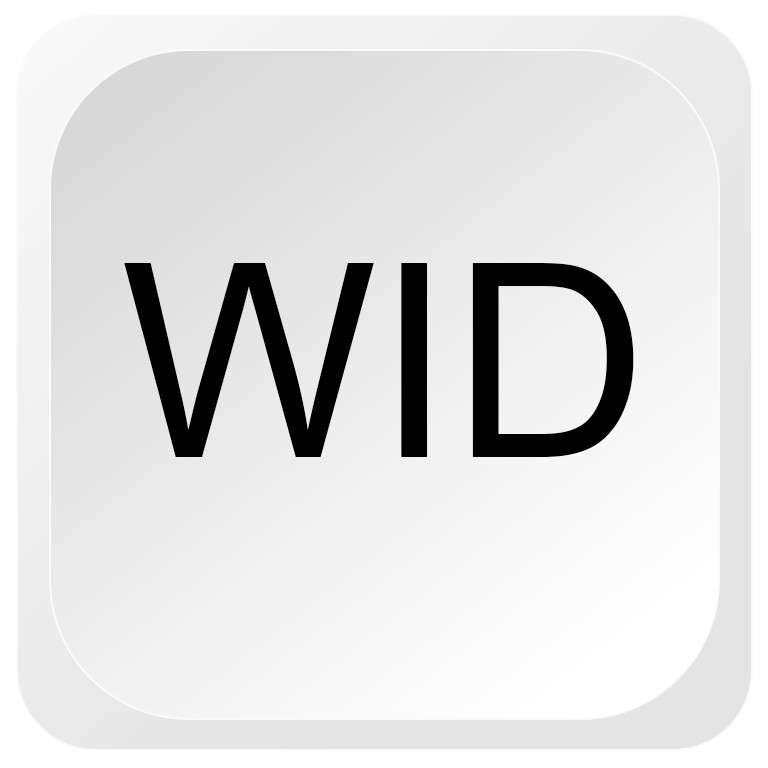
<style>
.page{position:relative;width:768px;height:768px}
.page>*{position:absolute;margin:0}
.t1{font:271px "ArialMT";color:#000000}
</style>
<div class="page">
<p class="t1" style="left:124px;top:263px;width:510px;height:194px">WID</p>
</div>
